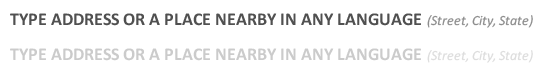
<style>
.page{position:relative;width:540px;height:70px;background:#ffffff}
.page>*{position:absolute;margin:0}
.t1{font:18px "Calibri-Bold";color:#505050}
.t2{font:14px "Calibri-Italic";color:#8d8d8d}
.t3{font:18px "Calibri-Bold";color:#cbcbcb}
.t4{font:14px "Calibri-Italic";color:#dddddd}
</style>
<div class="page">
<p class="t1" style="left:10px;top:13px;width:411px;height:13px">TYPE ADDRESS OR A PLACE NEARBY IN ANY LANGUAGE</p>
<p class="t2" style="left:427px;top:15px;width:106px;height:13px">(Street, City, State)</p>
<p class="t3" style="left:10px;top:48px;width:411px;height:13px">TYPE ADDRESS OR A PLACE NEARBY IN ANY LANGUAGE</p>
<p class="t4" style="left:427px;top:50px;width:106px;height:13px">(Street, City, State)</p>
</div>
